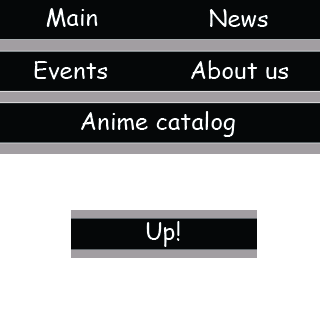
<style>
.page{position:relative;width:320px;height:320px;background:#ffffff}
.page>*{position:absolute;margin:0}
.t1{font:24px "ComicSansMS";color:#ffffff}
</style>
<div class="page">
<p class="t1" style="left:46px;top:8px;width:52px;height:19px">Main</p>
<p class="t1" style="left:209px;top:9px;width:59px;height:19px">News</p>
<p class="t1" style="left:34px;top:61px;width:74px;height:19px">Events</p>
<p class="t1" style="left:191px;top:60px;width:98px;height:19px">About us</p>
<p class="t1" style="left:81px;top:111px;width:154px;height:26px">Anime catalog</p>
<p class="t1" style="left:146px;top:221px;width:34px;height:26px">Up!</p>
</div>
